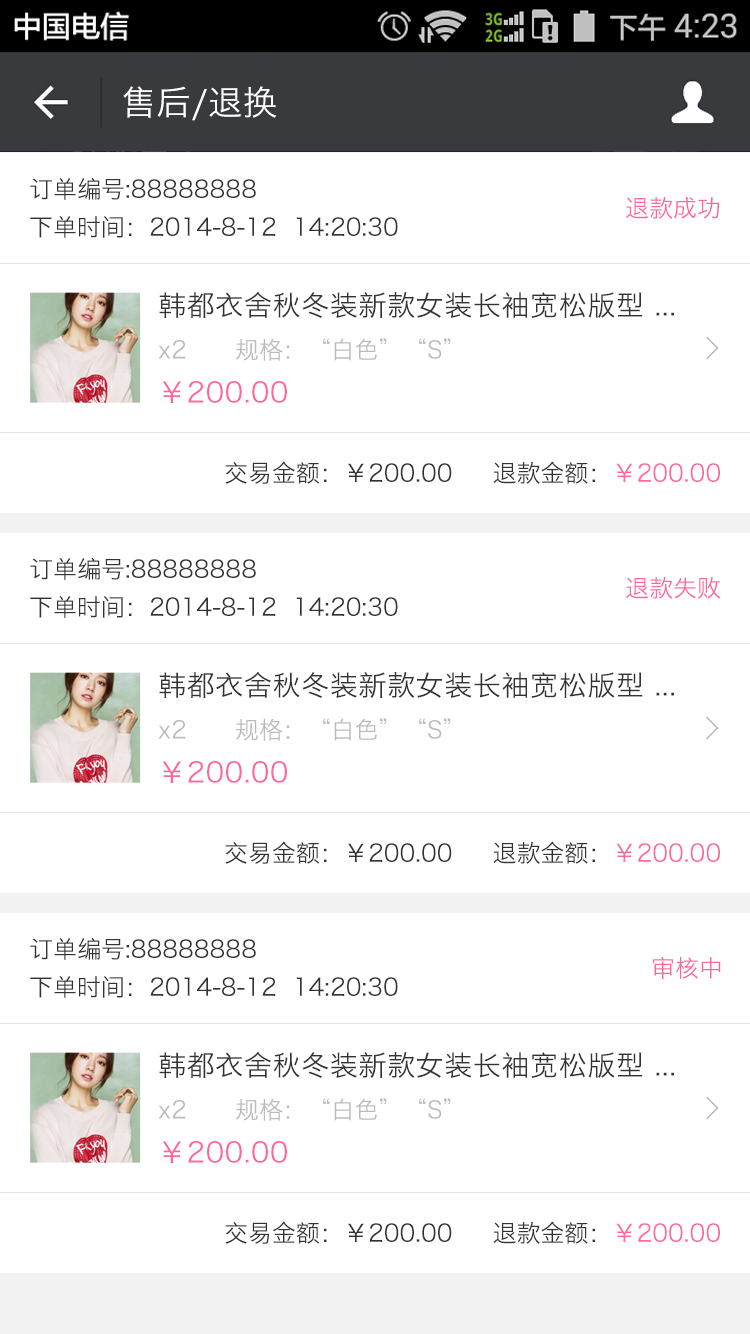
<style>
.page{position:relative;width:750px;height:1334px;background:#ffffff}
.page>*{position:absolute;margin:0}
.t1{font:34px "HiraginoSansGB-W3";letter-spacing:0.022em;color:#ffffff}
.t2{font:24px/36px "HiraginoSansGB-W3";color:#333333}
.t3{font:24px "HiraginoSansGB-W3";color:#ff6699}
.t4{font:28px "HiraginoSansGB-W3";letter-spacing:0.022em;color:#333333}
.t5{font:24px "HiraginoSansGB-W3";color:#bbbbbb}
.t6{font:32px "SimSun";color:#bbbbbb;font-weight:bold}
.t7{font:28px "HiraginoSansGB-W3";letter-spacing:0.022em;color:#ff6699}
.t8{font:24px "HiraginoSansGB-W3";color:#333333}
</style>
<div class="page">
<p class="t1" style="left:123px;top:86px;width:154px;height:35px">售后/退换</p>
<p class="t2" style="left:30px;top:177px;width:368px;height:61px">订单编号:88888888<br>下单时间：2014-8-12  14:20:30</p>
<p class="t3" style="left:626px;top:197px;width:93px;height:22px">退款成功</p>
<p class="t4" style="left:159px;top:291px;width:515px;height:27px">韩都衣舍秋冬装新款女装长袖宽松版型 ...</p>
<p class="t5" style="left:158px;top:338px;width:293px;height:23px">x2      规格：“白色”“S”</p>
<p class="t6" style="left:706px;top:336px;width:13px;height:24px">&gt;</p>
<p class="t7" style="left:162px;top:381px;width:125px;height:22px">￥200.00</p>
<p class="t8" style="left:225px;top:461px;width:495px;height:23px">交易金额：￥200.00     退款金额：<span class="t3">￥200.00</span></p>
<p class="t2" style="left:30px;top:557px;width:368px;height:61px">订单编号:88888888<br>下单时间：2014-8-12  14:20:30</p>
<p class="t3" style="left:626px;top:576px;width:95px;height:23px">退款失败</p>
<p class="t4" style="left:159px;top:671px;width:515px;height:27px">韩都衣舍秋冬装新款女装长袖宽松版型 ...</p>
<p class="t5" style="left:158px;top:718px;width:293px;height:23px">x2      规格：“白色”“S”</p>
<p class="t6" style="left:706px;top:716px;width:13px;height:24px">&gt;</p>
<p class="t7" style="left:162px;top:761px;width:125px;height:22px">￥200.00</p>
<p class="t8" style="left:225px;top:841px;width:495px;height:23px">交易金额：￥200.00     退款金额：<span class="t3">￥200.00</span></p>
<p class="t2" style="left:30px;top:937px;width:368px;height:61px">订单编号:88888888<br>下单时间：2014-8-12  14:20:30</p>
<p class="t3" style="left:653px;top:956px;width:68px;height:23px">审核中</p>
<p class="t4" style="left:159px;top:1051px;width:515px;height:27px">韩都衣舍秋冬装新款女装长袖宽松版型 ...</p>
<p class="t6" style="left:706px;top:1096px;width:13px;height:24px">&gt;</p>
<p class="t5" style="left:158px;top:1098px;width:293px;height:23px">x2      规格：“白色”“S”</p>
<p class="t7" style="left:162px;top:1141px;width:125px;height:22px">￥200.00</p>
<p class="t8" style="left:225px;top:1221px;width:495px;height:23px">交易金额：￥200.00     退款金额：<span class="t3">￥200.00</span></p>
</div>
